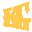
<style>
.page{position:relative;width:32px;height:32px;background:#fec951}
.page>*{position:absolute;margin:0}
.t1{font:30.3px "MesquiteStd";letter-spacing:-0.07em;color:#fec951;scale:1.87 1}
</style>
<div class="page">
<p class="t1" style="left:3px;top:2px;width:28px;height:29px">KG</p>
</div>
